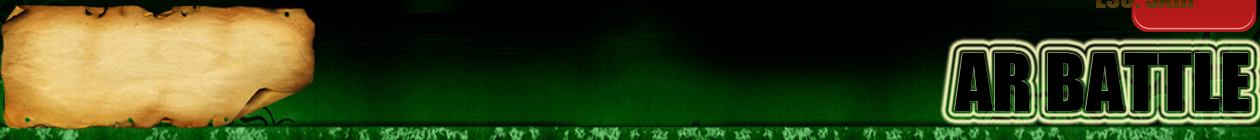
<style>
.page{position:relative;width:1260px;height:140px}
.page>*{position:absolute;margin:0}
.t1{font:72.9px "Impact";color:#000000}
</style>
<div class="page">
<p class="t1" style="left:954px;top:53px;width:296px;height:58px">AR BATTLE</p>
</div>
